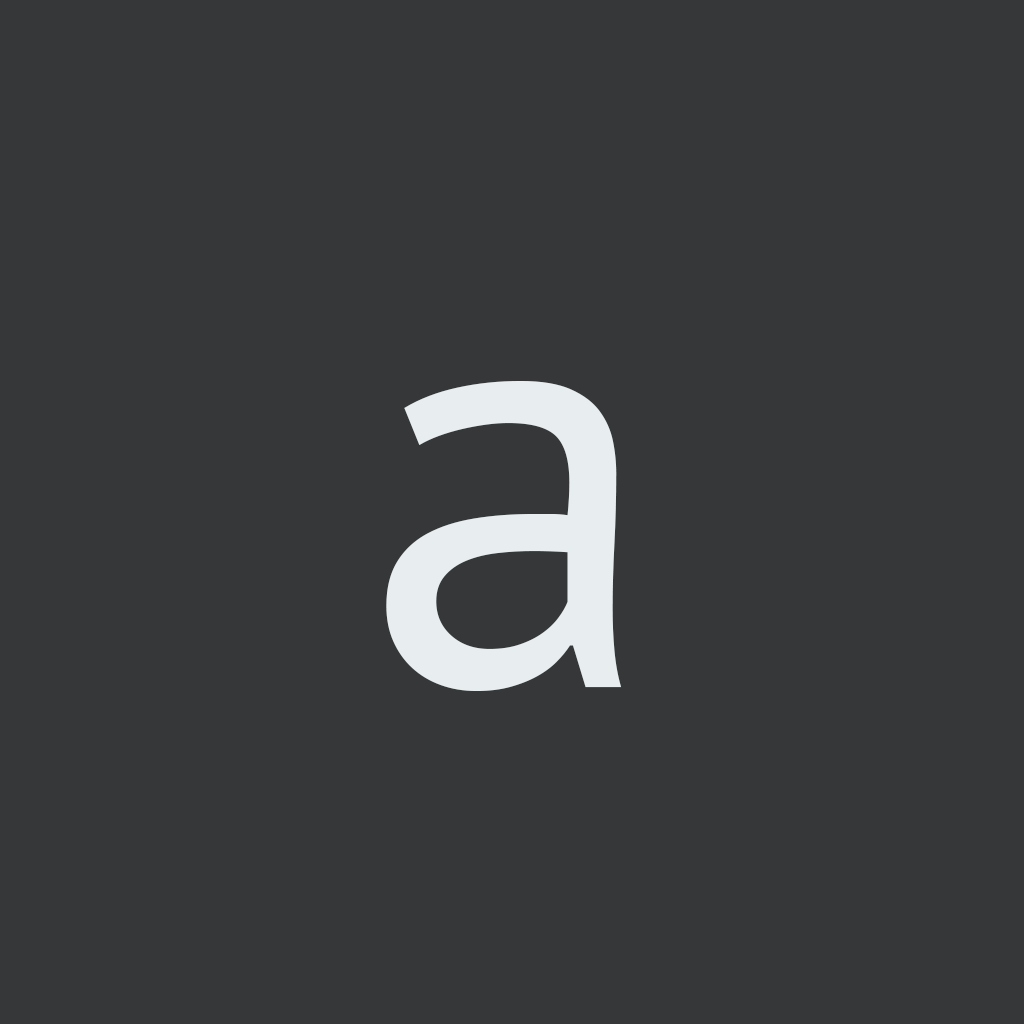
<style>
.page{position:relative;width:1024px;height:1024px;background:#363739}
.page>*{position:absolute;margin:0}
.t1{font:600px "PTSans-Regular";letter-spacing:0.01em;color:#e8edf0}
</style>
<div class="page">
<p class="t1" style="left:386px;top:381px;width:236px;height:310px">a</p>
</div>
